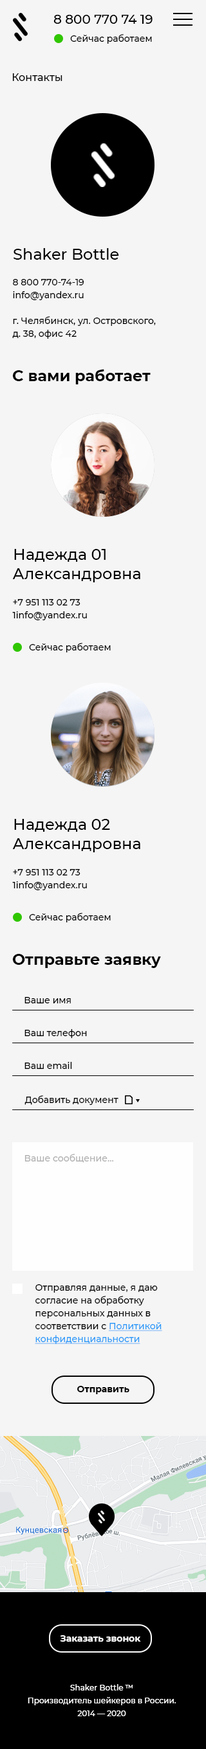
<style>
.page{position:relative;width:206px;height:1749px;background:#f5f5f5}
.page>*{position:absolute;margin:0}
.t1{font:12.9px "Montserrat-Medium";color:#000000}
.t2{font:9px "Montserrat-Medium";color:#000000}
.t3{font:10.3px "Montserrat-Medium";color:#000000}
.t4{font:15.4px "Montserrat-Medium";color:#000000}
.t5{font:9px/12.9px "Montserrat-Medium";color:#000000}
.t6{font:15.4px "Montserrat-Bold";color:#010101}
.t7{font:15.4px/19.3px "Montserrat-Medium";color:#000000}
.t8{font:9px "Montserrat-Medium";color:#b1b1b1}
.t9{font:9px/12.9px "Montserrat-Medium";color:#2899f8;text-decoration:underline}
.t10{font:9px "Montserrat-Bold";color:#010101}
.t11{font:9px "Montserrat-Bold";color:#ffffff}
.t12{font:7.7px/12.9px "Montserrat-Medium";color:#ffffff}
</style>
<div class="page">
<p class="t1" style="left:53px;top:15px;width:99px;height:9px">8 800 770 74 19</p>
<p class="t2" style="left:70px;top:34px;width:82px;height:10px">Сейчас работаем</p>
<p class="t3" style="left:12px;top:73px;width:50px;height:8px">Контакты</p>
<p class="t4" style="left:14px;top:248px;width:105px;height:12px">Shaker Bottle</p>
<p class="t5" style="left:12px;top:279px;width:144px;height:60px;text-align:right">8 800 770-74-19<br>info@yandex.ru<br><br>г. Челябинск, ул. Островского, <br>д. 38, офис 42</p>
<p class="t6" style="left:12px;top:369px;width:138px;height:15px">С вами работает</p>
<p class="t7" style="left:12px;top:549px;width:128px;height:33px;text-align:right">Надежда 01<br>Александровна</p>
<p class="t5" style="left:12px;top:599px;width:75px;height:21px;text-align:right">+7 951 113 02 73<br>1info@yandex.ru</p>
<p class="t2" style="left:29px;top:643px;width:82px;height:9px">Сейчас работаем</p>
<p class="t7" style="left:12px;top:819px;width:128px;height:33px;text-align:right">Надежда 02<br>Александровна</p>
<p class="t5" style="left:12px;top:869px;width:75px;height:21px;text-align:right">+7 951 113 02 73<br>1info@yandex.ru</p>
<p class="t2" style="left:29px;top:913px;width:82px;height:10px">Сейчас работаем</p>
<p class="t6" style="left:12px;top:954px;width:149px;height:14px">Отправьте заявку</p>
<p class="t2" style="left:24px;top:997px;width:47px;height:7px">Ваше имя</p>
<p class="t2" style="left:24px;top:1029px;width:63px;height:9px">Ваш телефон</p>
<p class="t2" style="left:24px;top:1062px;width:48px;height:7px">Ваш email</p>
<p class="t2" style="left:24px;top:1095px;width:94px;height:10px">Добавить документ</p>
<p class="t8" style="left:24px;top:1154px;width:89px;height:9px">Ваше сообщение...</p>
<p class="t5" style="left:35px;top:1284px;width:127px;height:60px;text-align:right">Отправляя данные, я даю согласие на обработку персональных данных в соответствии с <span class="t9">Политикой конфиденциальности</span></p>
<p class="t10" style="left:77px;top:1386px;width:52px;height:8px">Отправить</p>
<p class="t11" style="left:60px;top:1635px;width:81px;height:7px">Заказать звонок</p>
<p class="t12" style="left:28px;top:1684px;width:148px;height:32px;text-align:center">Shaker Bottle ™ <br>Производитель шейкеров в России. <br>2014 — 2020</p>
</div>
